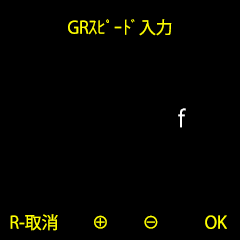
<style>
.page{position:relative;width:240px;height:240px;background:#000000}
.page>*{position:absolute;margin:0}
.t1{font:16.9px "KozGoPr6N-Regular";color:#ffff00}
.t2{font:23.1px "KozGoPr6N-Regular";color:#ffffff;scale:0.91 1}
</style>
<div class="page">
<p class="t1" style="left:68px;top:19px;width:104px;height:17px">GRｽﾋﾟｰﾄﾞ入力</p>
<p class="t2" style="left:178px;top:108px;width:8px;height:20px">f</p>
<p class="t1" style="left:10px;top:214px;width:217px;height:17px">R-取消　　⊕　　⊖　 　  OK</p>
</div>
